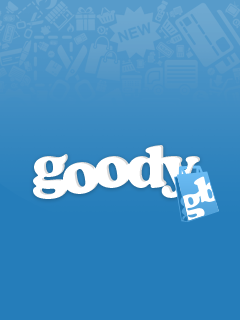
<style>
.page{position:relative;width:240px;height:320px;background:#257dba}
.page>*{position:absolute;margin:0}
.t1{font:60px "CooperBlackStd";letter-spacing:-0.1em;color:#ffffff}
</style>
<div class="page">
<p class="t1" style="left:33px;top:145px;width:167px;height:54px">goody</p>
</div>
